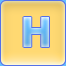
<style>
.page{position:relative;width:66px;height:66px}
.page>*{position:absolute;margin:0}
.t1{font:41px "Tahoma-Bold"}
</style>
<div class="page">
<p class="t1" style="left:23px;top:17px;width:26px;height:30px">Н</p>
<p class="t1" style="left:23px;top:17px;width:26px;height:30px">Н</p>
</div>
